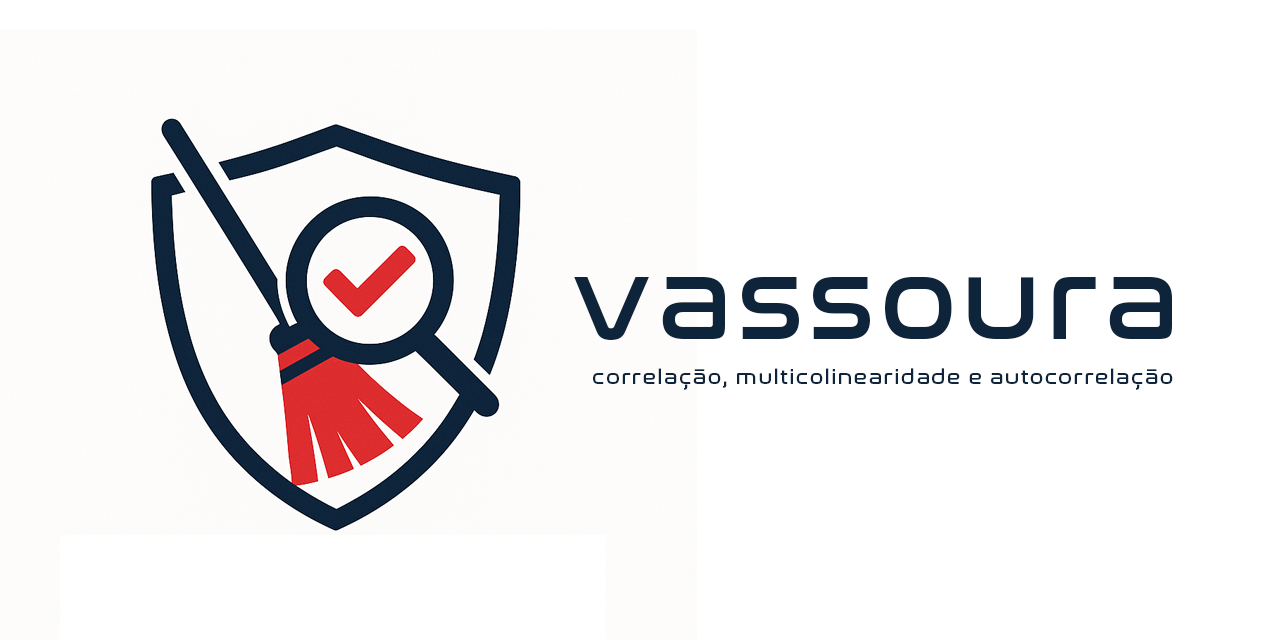
<style>
.page{position:relative;width:1280px;height:640px;background:#ffffff}
.page>*{position:absolute;margin:0}
.t1{font:116.8px "Nasalization-Regular";letter-spacing:0.025em;color:#0e243b}
.t2{font:20.6px "Nasalization-Regular";letter-spacing:0.06em;color:#0e243b}
</style>
<div class="page">
<p class="t1" style="left:574px;top:277px;width:598px;height:63px">vassoura</p>
<p class="t2" style="left:593px;top:368px;width:580px;height:22px">correlação, multicolinearidade e autocorrelação</p>
</div>
